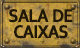
<style>
.page{position:relative;width:80px;height:48px}
.page>*{position:absolute;margin:0}
.t1{font:19px/15.9px "Corbel-Bold";letter-spacing:-0.1em;color:#1f180a;text-transform:uppercase;font-weight:bold;scale:0.9 1}
</style>
<div class="page">
<p class="t1" style="left:9px;top:9px;width:64px;height:30px;text-align:center">Sala  de<br>caixAs</p>
</div>
